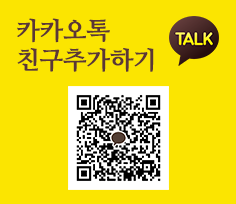
<style>
.page{position:relative;width:236px;height:204px;background:#fbe501}
.page>*{position:absolute;margin:0}
.t1{font:24.6px "NanumMyeongjoExtraBold";color:#5b3736}
</style>
<div class="page">
<p class="t1" style="left:17px;top:18px;width:137px;height:54px">카카오톡<br>친구추가하기</p>
</div>
